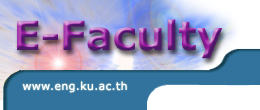
<style>
.page{position:relative;width:260px;height:110px;background:#31739c}
.page>*{position:absolute;margin:0}
.t1{font:40px "Verdana-Bold"}
.t2{font:11px "Verdana";letter-spacing:0.03em;color:#feffff}
</style>
<div class="page">
<p class="t1" style="left:17px;top:19px;width:206px;height:40px">E-Faculty</p>
<p class="t2" style="left:22px;top:81px;width:105px;height:12px">www.eng.ku.ac.th</p>
</div>
